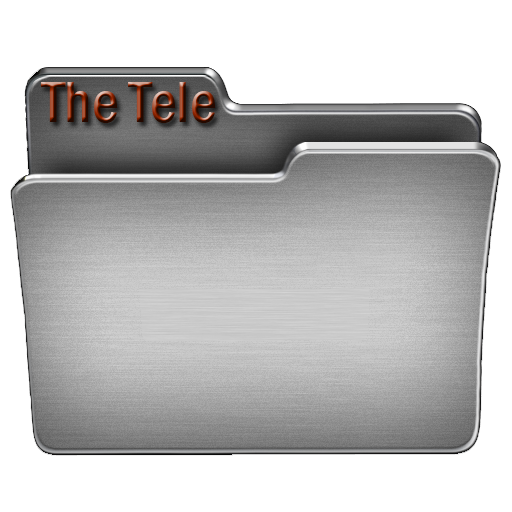
<style>
.page{position:relative;width:512px;height:512px;background:#ffffff}
.page>*{position:absolute;margin:0}
.t1{font:60px "FranklinGothic-MediumCond"}
</style>
<div class="page">
<p class="t1" style="left:41px;top:82px;width:175px;height:41px">The Tele</p>
</div>
